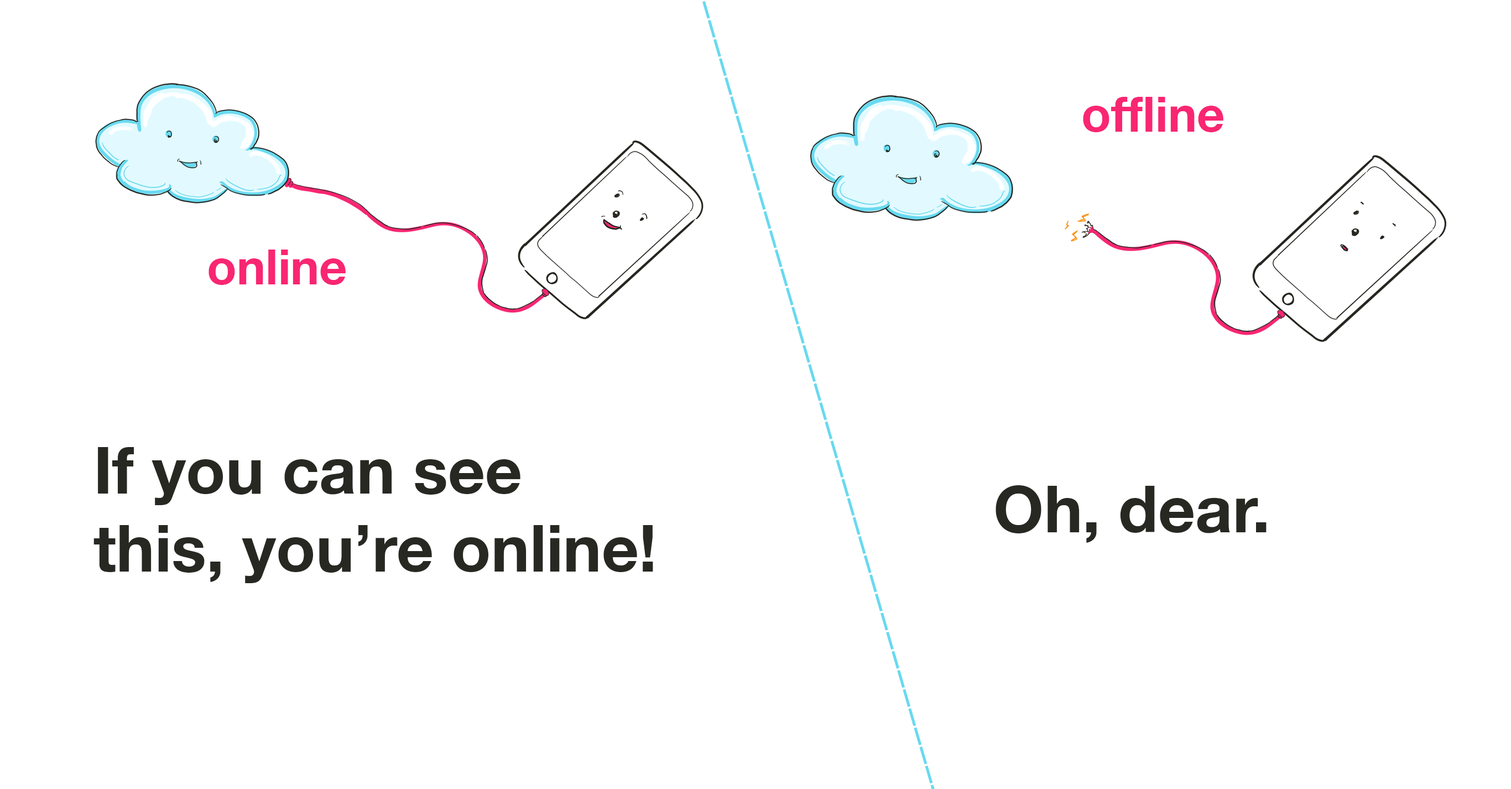
<style>
.page{position:relative;width:1511px;height:789px;background:#ffffff}
.page>*{position:absolute;margin:0}
.t1{font:48.7px "HelveticaNeue-Bold";color:#f92672}
.t2{font:64.9px "HelveticaNeue-Bold";color:#272822}
</style>
<div class="page">
<p class="t1" style="left:1083px;top:97px;width:141px;height:35px">offline</p>
<p class="t1" style="left:209px;top:250px;width:137px;height:35px">online</p>
<p class="t2" style="left:93px;top:447px;width:560px;height:136px">If you can see this, you’re online!</p>
<p class="t2" style="left:996px;top:485px;width:271px;height:58px">Oh, dear.</p>
</div>
